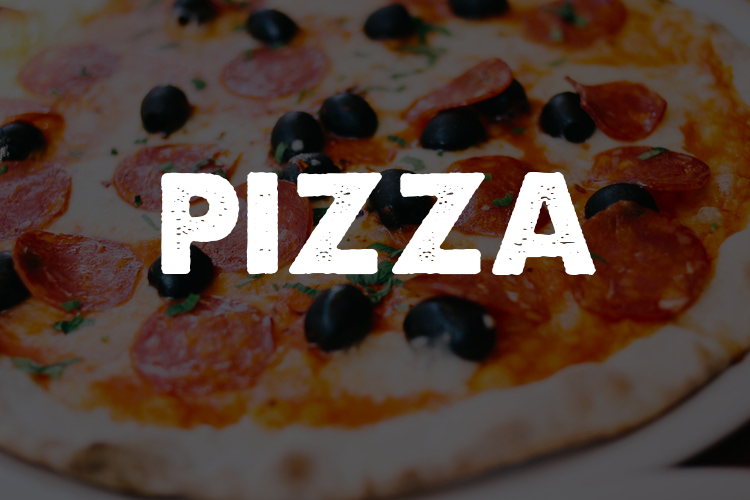
<style>
.page{position:relative;width:750px;height:500px}
.page>*{position:absolute;margin:0}
.t1{font:136px "ALoveofThunder";color:#ffffff}
</style>
<div class="page">
<p class="t1" style="left:161px;top:171px;width:435px;height:104px">PIZZA</p>
</div>
